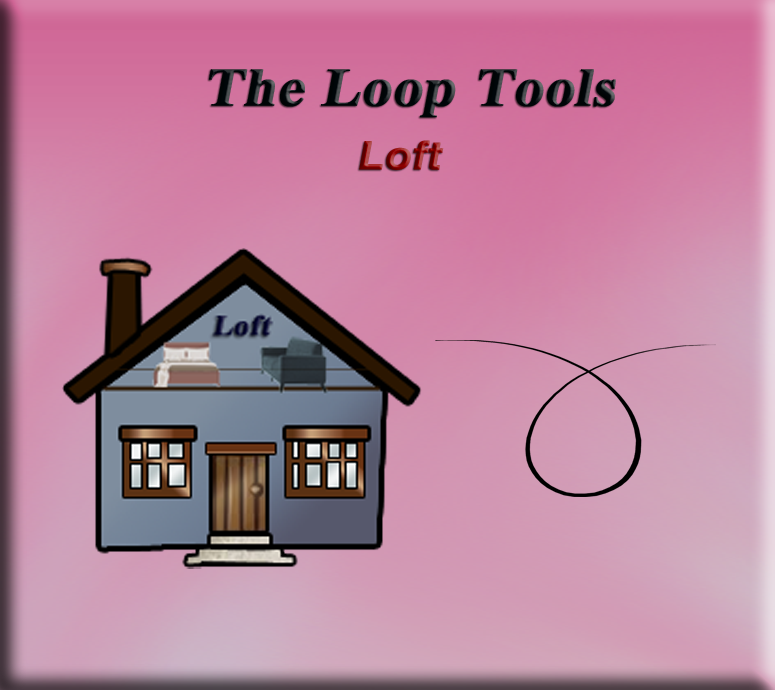
<style>
.page{position:relative;width:775px;height:690px}
.page>*{position:absolute;margin:0}
.t1{font:53.9px "TimesNewRomanPS-BoldMT";color:#000609;font-weight:bold;font-style:italic;scale:1.08 1}
.t2{font:39.1px "HelveticaLTStd-Bold";font-weight:bold;font-style:italic;scale:1.08 1}
.t3{font:53.9px "TimesNewRomanPS-BoldMT";font-weight:bold;font-style:italic;scale:1.08 1}
</style>
<div class="page">
<p class="t1" style="left:209px;top:69px;width:407px;height:49px">The Loop Tools</p>
<p class="t2" style="left:359px;top:140px;width:85px;height:30px"><span class="t3"> </span>Loft</p>
</div>
